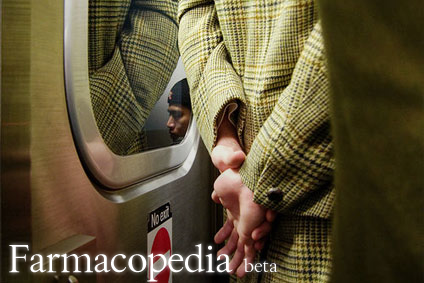
<style>
.page{position:relative;width:424px;height:283px}
.page>*{position:absolute;margin:0}
.t1{font:39px "ThryomanesNormal";color:#ffffff}
.t2{font:19px "ThryomanesNormal";color:#ffffff}
</style>
<div class="page">
<p class="t1" style="left:9px;top:243px;width:269px;height:39px">Farmacopedia <span class="t2">beta</span></p>
</div>
